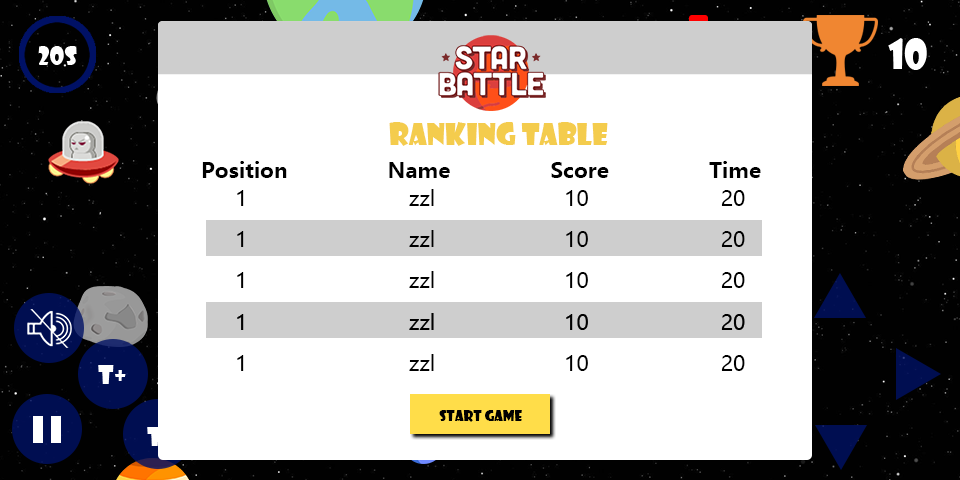
<style>
.page{position:relative;width:960px;height:480px;background:#ffffff}
.page>*{position:absolute;margin:0}
.t1{font:29px "ShowcardGothic-Reg";color:#f4cc4d}
.t2{font:21px "MicrosoftYaHei-Bold";color:#000000}
.t3{font:21px "MicrosoftYaHei";color:#000000}
.t4{font:14px "ShowcardGothic-Reg";color:#000000}
</style>
<div class="page">
<p class="t1" style="left:389px;top:122px;width:219px;height:24px">Ranking table</p>
<p class="t2" style="left:202px;top:161px;width:559px;height:17px">Position                Name                Score                Time</p>
<p class="t3" style="left:237px;top:189px;width:508px;height:17px">1         zzl     10       20</p>
<p class="t3" style="left:237px;top:230px;width:508px;height:17px">1         zzl     10       20</p>
<p class="t3" style="left:237px;top:271px;width:508px;height:17px">1         zzl     10       20</p>
<p class="t3" style="left:237px;top:354px;width:508px;height:17px">1         zzl     10       20</p>
<p class="t4" style="left:439px;top:410px;width:83px;height:12px">start game</p>
</div>
